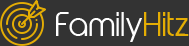
<style>
.page{position:relative;width:189px;height:46px;background:#333333}
.page>*{position:absolute;margin:0}
.t1{font:30px "AbeatbyKai";color:#ffffff}
.t2{font:30px "AbeatbyKai";color:#e4ad04}
</style>
<div class="page">
<p class="t1" style="left:56px;top:12px;width:133px;height:30px">Family<span class="t2">Hitz</span></p>
</div>
